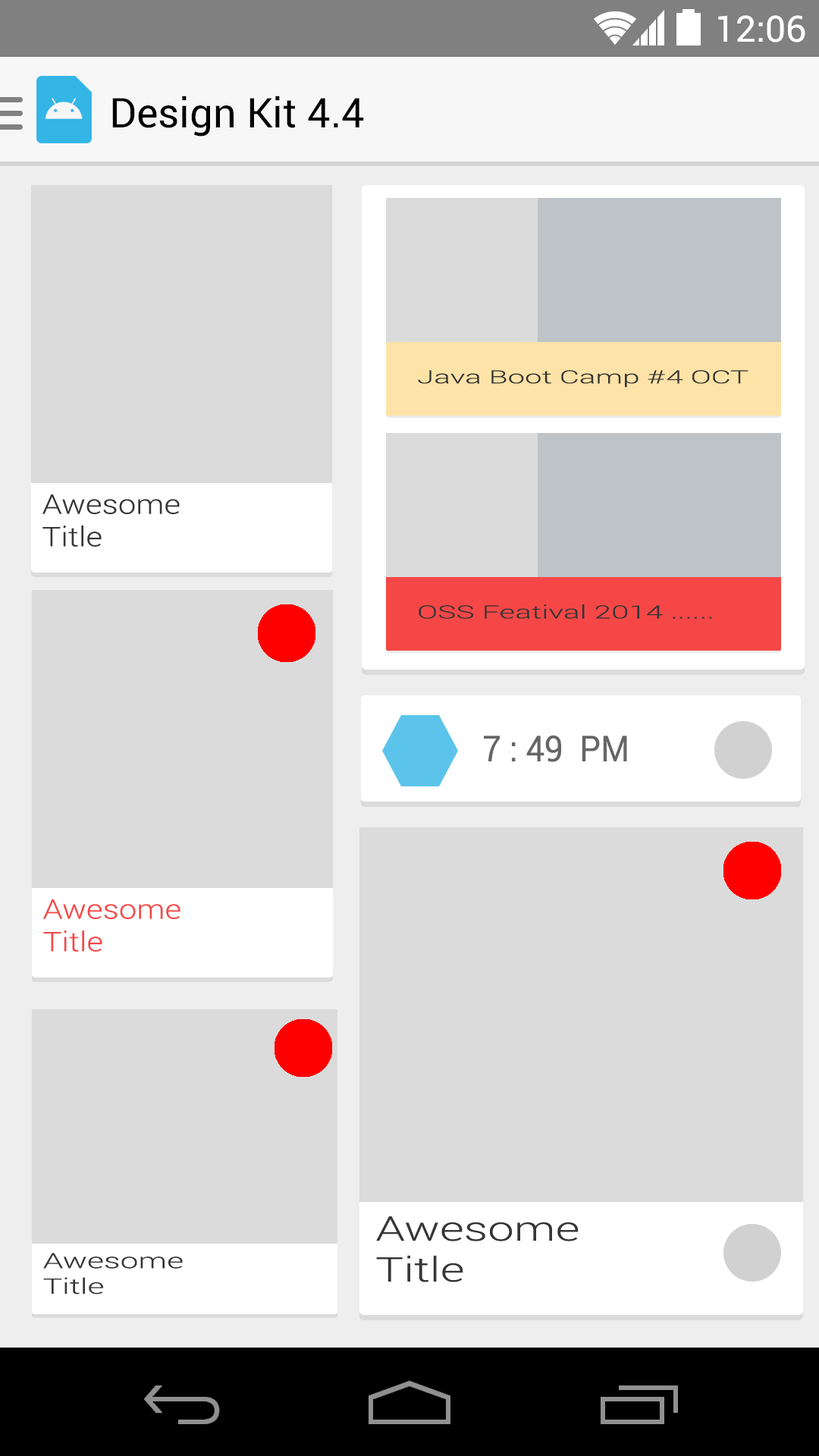
<style>
.page{position:relative;width:819px;height:1456px;background:#dbdbdb}
.page>*{position:absolute;margin:0}
.t1{font:36.4px "Roboto-Regular";color:#ffffff}
.t2{font:40.9px "Roboto-Regular";color:#000000}
.t3{font:18.2px "Roboto-Light";color:#363636;scale:1.68 1}
.t4{font:27.1px "Roboto-Light";color:#363636;scale:1.18 1}
.t5{font:35.9px "Roboto-Regular";color:#666666;scale:0.92 1}
.t6{font:27.1px "Roboto-Light";color:#f64747;scale:1.18 1}
.t7{font:34px "Roboto-Light";color:#363636;scale:1.38 1}
.t8{font:21.3px "Roboto-Light";color:#363636;scale:1.52 1}
</style>
<div class="page">
<p class="t1" style="left:718px;top:15px;width:87px;height:27px">12:06</p>
<p class="t2" style="left:112px;top:96px;width:252px;height:40px">Design Kit 4.4</p>
<p class="t3" style="left:418px;top:370px;width:330px;height:18px">Java Boot Camp #4 OCT</p>
<p class="t4" style="left:42px;top:494px;width:138px;height:53px">Awesome<br>Title</p>
<p class="t3" style="left:419px;top:604px;width:293px;height:15px">OSS Featival 2014 ......</p>
<p class="t5" style="left:484px;top:735px;width:143px;height:27px">7 : 49  PM</p>
<p class="t6" style="left:43px;top:899px;width:137px;height:53px">Awesome<br>Title</p>
<p class="t7" style="left:376px;top:1216px;width:203px;height:66px">Awesome<br>Title</p>
<p class="t8" style="left:43px;top:1253px;width:140px;height:41px">Awesome<br>Title</p>
</div>
